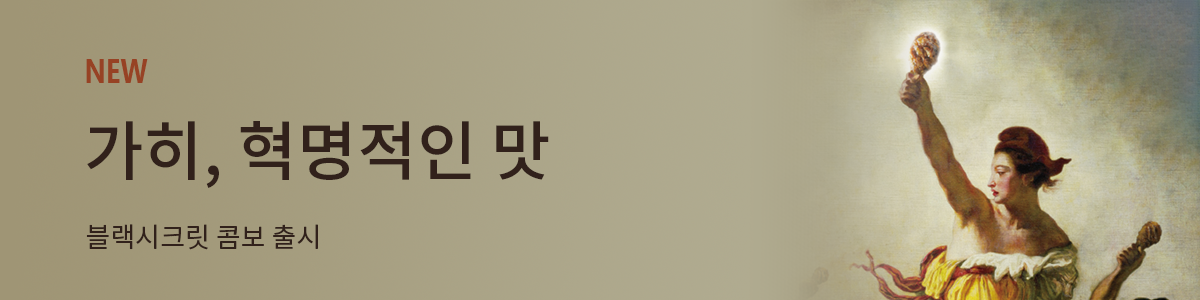
<style>
.page{position:relative;width:1200px;height:300px}
.page>*{position:absolute;margin:0}
.t1{font:33px "SegoeUI-Bold";color:#974224;scale:0.82 1}
.t2{font:65px "NotoSansKR-Medium";color:#31211b}
.t3{font:27px "NotoSansKR-Regular";color:#31211b}
</style>
<div class="page">
<p class="t1" style="left:86px;top:59px;width:62px;height:24px">NEW</p>
<p class="t2" style="left:87px;top:121px;width:462px;height:67px">가히, 혁명적인 맛</p>
<p class="t3" style="left:86px;top:224px;width:232px;height:26px">블랙시크릿 콤보 출시</p>
</div>
